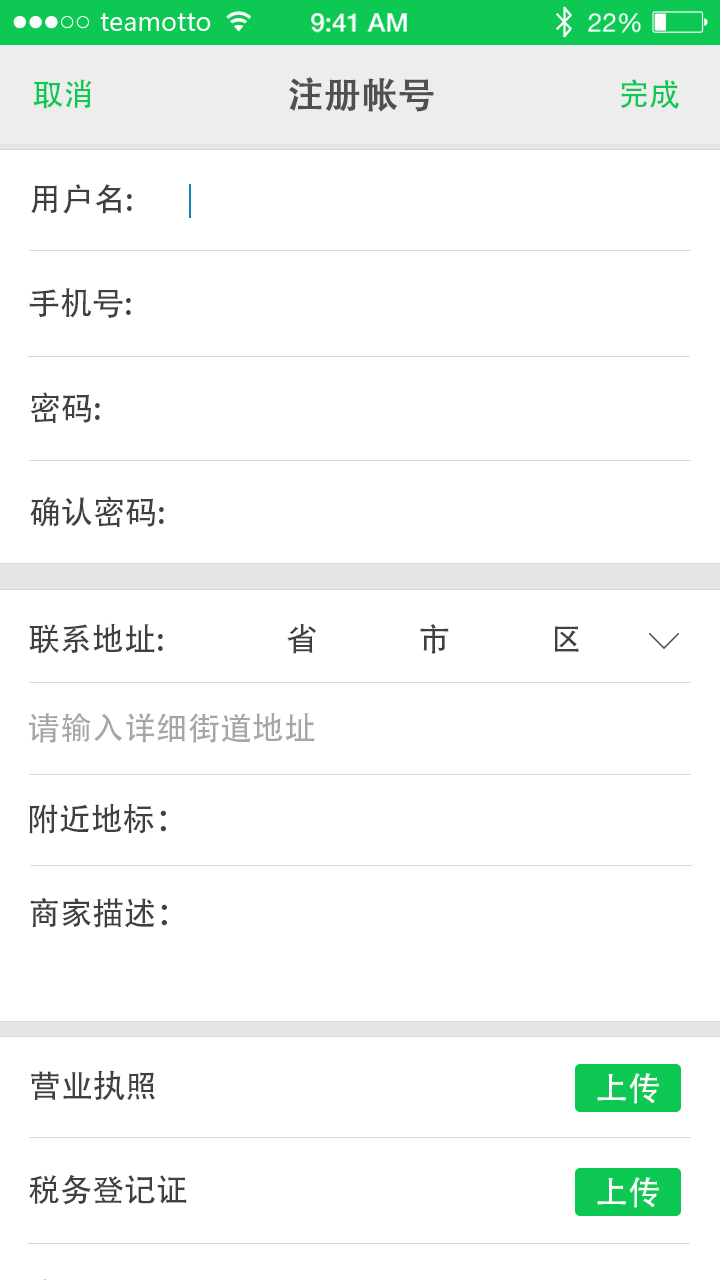
<style>
.page{position:relative;width:720px;height:1280px;background:#ffffff}
.page>*{position:absolute;margin:0}
.t1{font:36px "AdobeHeitiStd-Regular";color:#505050;font-weight:bold}
.t2{font:31px "AdobeHeitiStd-Regular";color:#0dc853}
.t3{font:32px "AdobeHeitiStd-Regular";color:#404040}
.t4{font:32px "AdobeHeitiStd-Regular";color:#a6a6a6}
.t5{font:32px "AdobeHeitiStd-Regular";color:#ffffff}
</style>
<div class="page">
<p class="t1" style="left:289px;top:77px;width:145px;height:35px">注册帐号</p>
<p class="t2" style="left:33px;top:79px;width:59px;height:30px">取消</p>
<p class="t2" style="left:620px;top:79px;width:59px;height:30px">完成</p>
<p class="t3" style="left:31px;top:184px;width:101px;height:30px">用户名:</p>
<p class="t3" style="left:29px;top:288px;width:102px;height:30px">手机号:</p>
<p class="t3" style="left:30px;top:392px;width:70px;height:31px">密码:</p>
<p class="t3" style="left:30px;top:496px;width:134px;height:31px">确认密码:</p>
<p class="t3" style="left:29px;top:623px;width:550px;height:31px">联系地址:                 省              市              区</p>
<p class="t4" style="left:29px;top:712px;width:286px;height:31px">请输入详细街道地址</p>
<p class="t3" style="left:29px;top:803px;width:137px;height:31px">附近地标：</p>
<p class="t3" style="left:30px;top:898px;width:137px;height:30px">商家描述：</p>
<p class="t3" style="left:31px;top:1070px;width:124px;height:31px">营业执照</p>
<p class="t5" style="left:597px;top:1073px;width:62px;height:31px">上传</p>
<p class="t3" style="left:29px;top:1174px;width:158px;height:31px">税务登记证</p>
<p class="t5" style="left:597px;top:1177px;width:62px;height:31px">上传</p>
</div>
